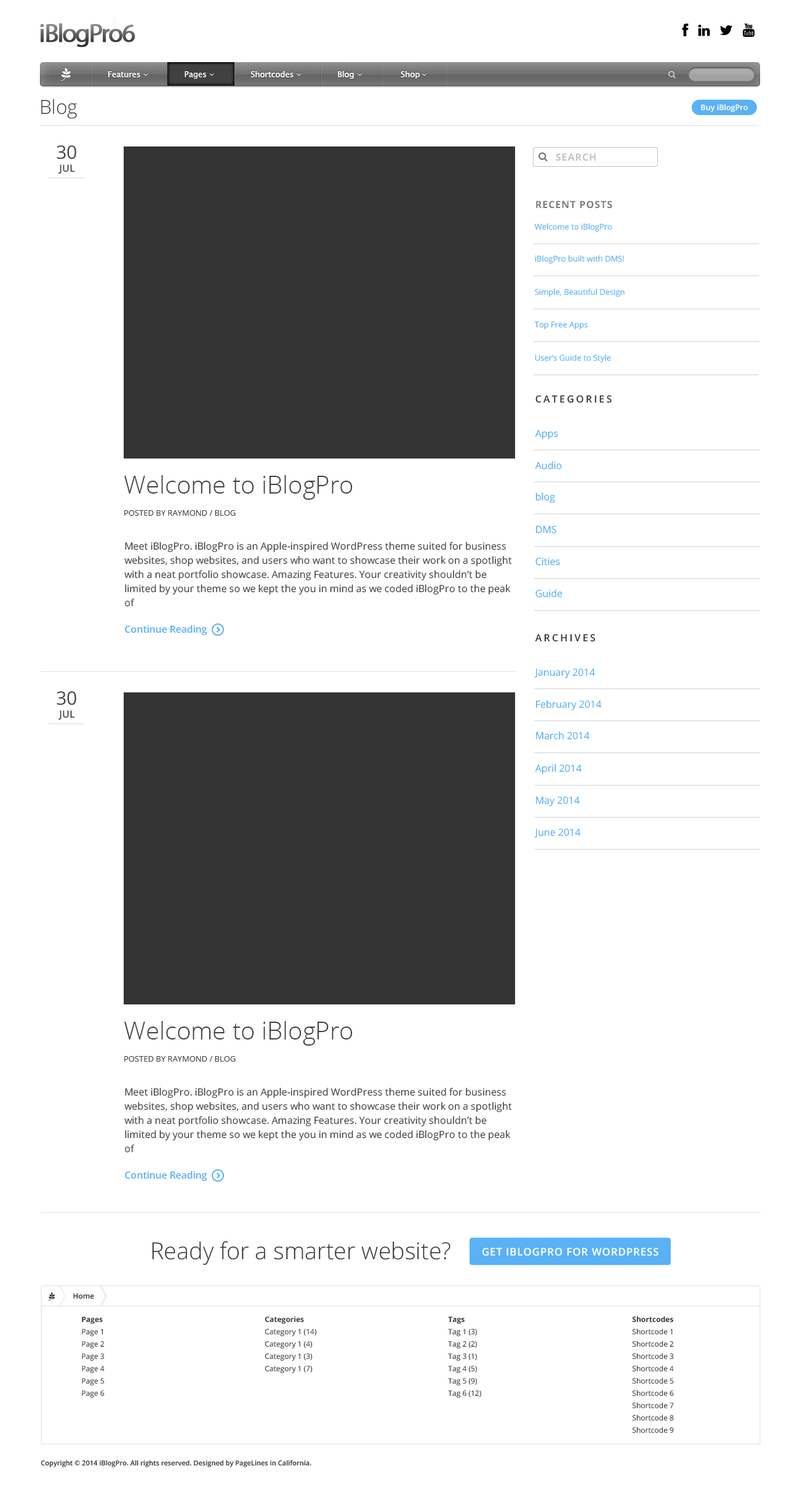
<style>
.page{position:relative;width:800px;height:1490px;background:#ffffff}
.page>*{position:absolute;margin:0}
.t1{font:25.9px "MyriadPro-Regular";letter-spacing:-0.065em;font-weight:bold}
.t2{font:8px "LucidaSansUnicode";color:#ffffff}
.t3{font:19.3px "OpenSans-Light";color:#333333}
.t4{font:7.7px "OpenSans-Semibold";color:#ffffff}
.t5{font:18.5px "OpenSans";color:#414141}
.t6{font:9.8px "OpenSans-Bold";letter-spacing:0.06em;color:#c4c4c4;text-transform:uppercase}
.t7{font:9.8px "OpenSans-Semibold";color:#414141;text-transform:uppercase}
.t8{font:9.8px "OpenSans-Bold";letter-spacing:0.06em;color:#7c7c7b;text-transform:uppercase}
.t9{font:8px "OpenSans";color:#59b1f6}
.t10{font:9.8px "OpenSans-Semibold";letter-spacing:0.2em;color:#333333;text-transform:uppercase}
.t11{font:9.8px "OpenSans";color:#59b1f6}
.t12{font:24.6px "OpenSans-Light";color:#414141}
.t13{font:8px "OpenSans";color:#414141;text-transform:uppercase}
.t14{font:9.8px/14.1px "OpenSans";color:#414141}
.t15{font:9.8px "OpenSans-Semibold";color:#59b1f6}
.t16{font:23.4px "OpenSans-Light";color:#333333}
.t17{font:10.4px "OpenSans-Semibold";letter-spacing:0.06em;color:#ffffff;text-transform:uppercase}
.t18{font:7.4px "OpenSans-Semibold";color:#333333}
.t19{font:7.4px/12.3px "OpenSans";color:#333333}
.t20{font:7.4px/12.3px "OpenSans-Bold";color:#333333}
.t21{font:6.8px "OpenSans-Semibold";color:#333333}
</style>
<div class="page">
<p class="t1" style="left:40px;top:23px;width:95px;height:24px">iBlogPro6</p>
<p class="t2" style="left:108px;top:71px;width:312px;height:8px">Features         Pages         Shortcodes                Blog             Shop</p>
<p class="t2" style="left:108px;top:71px;width:312px;height:8px">Features         Pages         Shortcodes                Blog             Shop</p>
<p class="t2" style="left:185px;top:71px;width:21px;height:8px">Pages</p>
<p class="t3" style="left:41px;top:99px;width:36px;height:20px">Blog</p>
<p class="t4" style="left:701px;top:104px;width:47px;height:9px">Buy iBlogPro</p>
<p class="t5" style="left:57px;top:145px;width:19px;height:14px">30</p>
<p class="t6" style="left:556px;top:153px;width:40px;height:8px">Search</p>
<p class="t7" style="left:58px;top:164px;width:17px;height:10px">Jul</p>
<p class="t8" style="left:536px;top:201px;width:76px;height:8px">Recent Posts</p>
<p class="t9" style="left:534px;top:223px;width:78px;height:9px">Welcome to iBlogPro</p>
<p class="t9" style="left:535px;top:255px;width:89px;height:9px">iBlogPro built with DMS!</p>
<p class="t9" style="left:535px;top:288px;width:90px;height:9px">Simple, Beautiful Design</p>
<p class="t9" style="left:534px;top:321px;width:54px;height:9px">Top Free Apps</p>
<p class="t9" style="left:535px;top:354px;width:76px;height:9px">User’s Guide to Style</p>
<p class="t10" style="left:536px;top:395px;width:76px;height:8px">Categories</p>
<p class="t11" style="left:535px;top:430px;width:23px;height:9px">Apps</p>
<p class="t11" style="left:535px;top:461px;width:27px;height:9px">Audio</p>
<p class="t12" style="left:124px;top:475px;width:229px;height:25px">Welcome to iBlogPro</p>
<p class="t11" style="left:536px;top:492px;width:19px;height:11px">blog</p>
<p class="t13" style="left:124px;top:510px;width:112px;height:6px">Posted by Raymond / Blog</p>
<p class="t11" style="left:536px;top:526px;width:20px;height:8px">DMS</p>
<p class="t14" style="left:124px;top:542px;width:388px;height:65px">Meet iBlogPro. iBlogPro is an Apple-inspired WordPress theme suited for business websites, shop websites, and users who want to showcase their work on a spotlight with a neat portfolio showcase. Amazing Features. Your creativity shouldn’t be limited by your theme so we kept the you in mind as we coded iBlogPro to the peak of</p>
<p class="t11" style="left:536px;top:558px;width:24px;height:8px">Cities</p>
<p class="t11" style="left:536px;top:589px;width:27px;height:9px">Guide</p>
<p class="t15" style="left:125px;top:625px;width:82px;height:10px">Continue Reading</p>
<p class="t10" style="left:535px;top:634px;width:60px;height:8px">Archives</p>
<p class="t11" style="left:534px;top:668px;width:61px;height:10px">January 2014</p>
<p class="t5" style="left:57px;top:691px;width:19px;height:14px">30</p>
<p class="t11" style="left:536px;top:700px;width:66px;height:10px">February 2014</p>
<p class="t7" style="left:58px;top:710px;width:17px;height:10px">Jul</p>
<p class="t11" style="left:536px;top:731px;width:54px;height:9px">March 2014</p>
<p class="t11" style="left:535px;top:764px;width:47px;height:10px">April 2014</p>
<p class="t11" style="left:536px;top:796px;width:44px;height:10px">May 2014</p>
<p class="t11" style="left:534px;top:829px;width:47px;height:9px">June 2014</p>
<p class="t12" style="left:124px;top:1021px;width:229px;height:25px">Welcome to iBlogPro</p>
<p class="t13" style="left:124px;top:1056px;width:112px;height:6px">Posted by Raymond / Blog</p>
<p class="t14" style="left:124px;top:1088px;width:388px;height:65px">Meet iBlogPro. iBlogPro is an Apple-inspired WordPress theme suited for business websites, shop websites, and users who want to showcase their work on a spotlight with a neat portfolio showcase. Amazing Features. Your creativity shouldn’t be limited by your theme so we kept the you in mind as we coded iBlogPro to the peak of</p>
<p class="t15" style="left:125px;top:1171px;width:82px;height:10px">Continue Reading</p>
<p class="t16" style="left:152px;top:1241px;width:299px;height:25px">Ready for a smarter website?</p>
<p class="t17" style="left:482px;top:1248px;width:177px;height:8px">Get iBlogPro for WordPress</p>
<p class="t18" style="left:73px;top:1293px;width:21px;height:6px">Home</p>
<p class="t19" style="left:82px;top:1317px;width:23px;height:81px"><span class="t20">Pages<br></span>Page 1<br>Page 2<br>Page 3<br>Page 4<br>Page 5<br>Page 6</p>
<p class="t19" style="left:265px;top:1317px;width:52px;height:57px"><span class="t20">Categories<br></span>Category 1 (14)<br>Category 1 (4)<br>Category 1 (3)<br>Category 1 (7)</p>
<p class="t19" style="left:448px;top:1317px;width:33px;height:81px"><span class="t20">Tags<br></span>Tag 1 (3)<br>Tag 2 (2)<br>Tag 3 (1)<br>Tag 4 (5)<br>Tag 5 (9)<br>Tag 6 (12)</p>
<p class="t19" style="left:632px;top:1316px;width:42px;height:118px"><span class="t20">Shortcodes<br></span>Shortcode 1<br>Shortcode 2<br>Shortcode 3<br>Shortcode 4<br>Shortcode 5<br>Shortcode 6<br>Shortcode 7<br>Shortcode 8<br>Shortcode 9</p>
<p class="t21" style="left:41px;top:1460px;width:270px;height:7px">Copyright © 2014 iBlogPro. All rights reserved. Designed by PageLines in California.</p>
</div>
